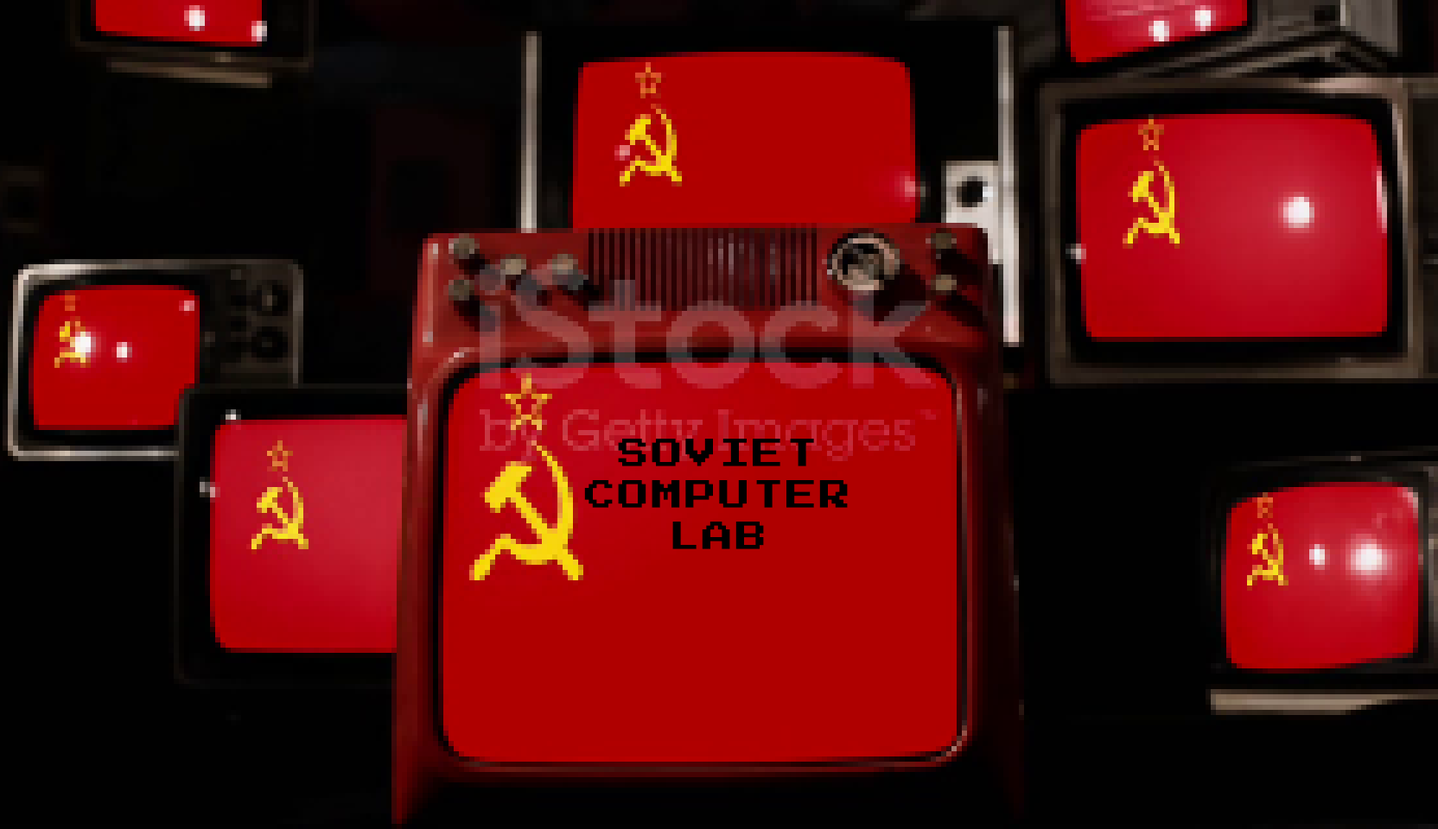
<style>
.page{position:relative;width:1438px;height:829px;background:#010101}
.page>*{position:absolute;margin:0}
.t1{font:31.1px/41.5px "PressStart2P-Regular";letter-spacing:0.08em;color:#000000}
</style>
<div class="page">
<p class="t1" style="left:584px;top:439px;width:264px;height:110px;text-align:center">SOVIET<br>COMPUTER<br>LAB</p>
</div>
